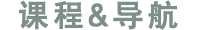
<style>
.page{position:relative;width:200px;height:30px;background:#ffffff}
.page>*{position:absolute;margin:0}
.t1{font:31px "FZHTJW--GB1-0";letter-spacing:0.1em;color:#7e8f8b;font-weight:bold}
</style>
<div class="page">
<p class="t1" style="left:19px;top:0px;width:159px;height:30px">课程&amp;导航</p>
</div>
